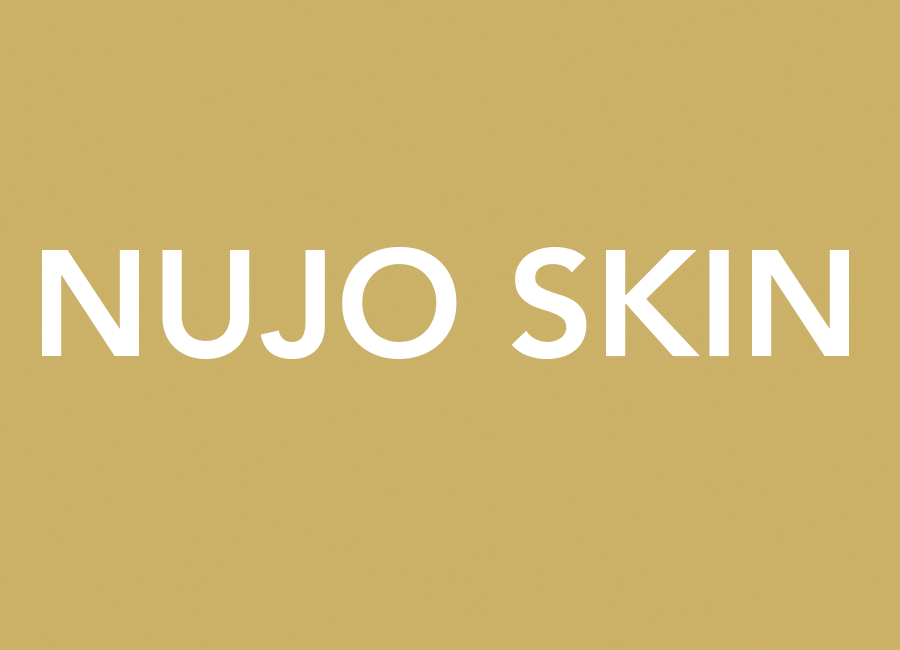
<style>
.page{position:relative;width:900px;height:650px;background:#cbb068}
.page>*{position:absolute;margin:0}
.t1{font:150.2px "Avenir-Heavy";color:#ffffff}
</style>
<div class="page">
<p class="t1" style="left:42px;top:247px;width:807px;height:112px">NUJO SKIN</p>
</div>
